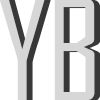
<style>
.page{position:relative;width:100px;height:100px;background:#ffffff}
.page>*{position:absolute;margin:0}
.t1{font:132px "AgencyFB-Reg"}
</style>
<div class="page">
<p class="t1" style="left:5px;top:0px;width:96px;height:101px">YB</p>
</div>
